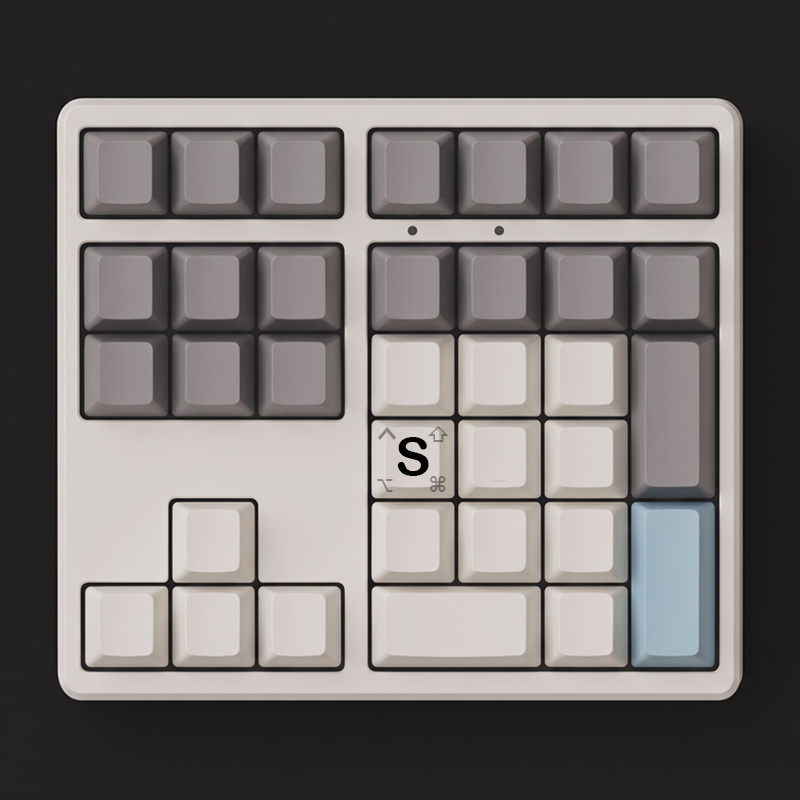
<style>
.page{position:relative;width:800px;height:800px}
.page>*{position:absolute;margin:0}
.t1{font:29.5px "LucidaGrande-Bold";color:#888482;scale:0.91 1}
.t2{font:53.8px "ArialRoundedMTBold";color:#000000}
.t3{font:20px "LucidaGrande-Bold"}
.t4{font:18.4px "LucidaGrande-Bold";color:#857f7e}
.t5{font:20px "LucidaGrande-Bold";color:#716a64}
</style>
<div class="page">
<p class="t1" style="left:378px;top:427px;width:18px;height:13px">⌃</p>
<p class="t2" style="left:397px;top:437px;width:32px;height:39px">S</p>
<p class="t3" style="left:428px;top:426px;width:21px;height:16px">⇧</p>
<p class="t4" style="left:377px;top:479px;width:16px;height:13px">⌥</p>
<p class="t5" style="left:430px;top:476px;width:16px;height:16px">⌘</p>
</div>
